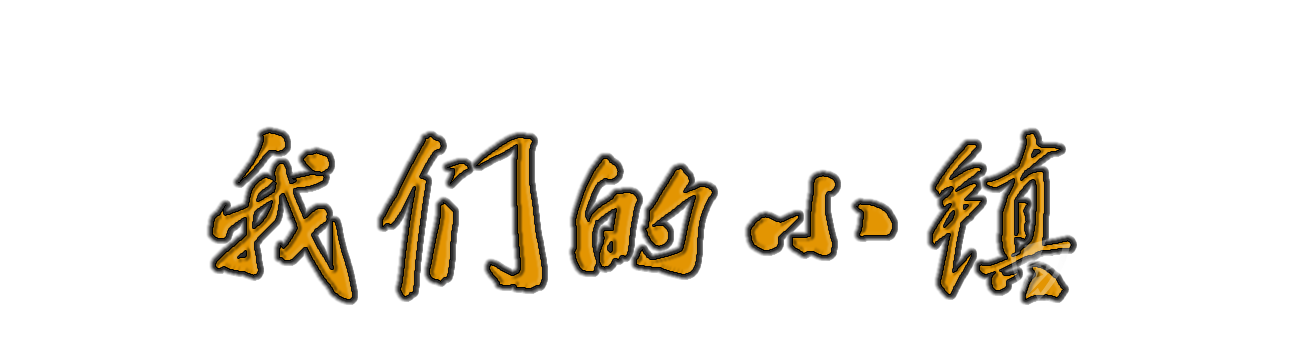
<style>
.page{position:relative;width:1289px;height:342px;background:#ffffff}
.page>*{position:absolute;margin:0}
.t1{font:180px "CaiYunHanMaoBi-Xing-jian"}
</style>
<div class="page">
<p class="t1" style="left:212px;top:132px;width:860px;height:168px">我们的小镇</p>
</div>
